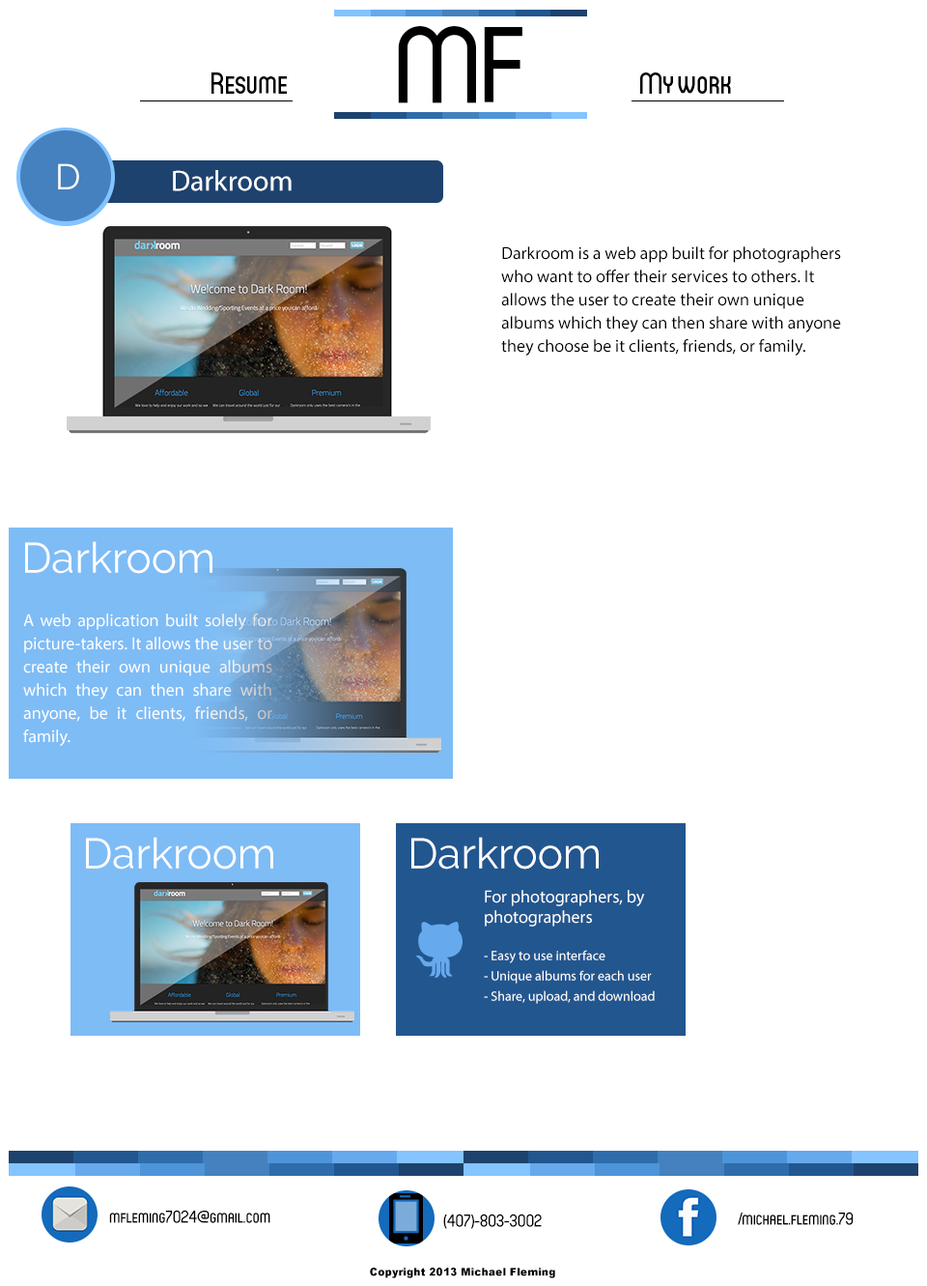
<style>
.page{position:relative;width:927px;height:1286px;background:#ffffff}
.page>*{position:absolute;margin:0}
.t1{font:108.2px "Circula-Medium";color:#000000}
.t2{font:35.7px "Raleway-Regular";color:#ffffff}
.t3{font:29px "MyriadPro-Regular";color:#ffffff}
.t4{font:17.4px/23.2px "MyriadPro-Regular";color:#000000}
.t5{font:42.5px "Raleway-Regular";color:#ffffff}
.t6{font:17.4px/23.2px "MyriadPro-Regular";color:#ffffff}
.t7{font:13.5px/20.3px "MyriadPro-Regular";color:#ffffff}
.t8{font:17.4px/20.3px "MyriadPro-Regular";color:#ffffff}
.t9{font:17.4px "Circula-Medium";color:#000000}
.t10{font:10.6px "Arial-Black";color:#000000}
</style>
<div class="page">
<p class="t1" style="left:398px;top:26px;width:125px;height:77px">MF</p>
<p class="t2" style="left:58px;top:163px;width:21px;height:26px">D</p>
<p class="t3" style="left:173px;top:170px;width:119px;height:21px">Darkroom</p>
<p class="t4" style="left:501px;top:246px;width:340px;height:110px">Darkroom is a web app built for photographers who want to offer their services to others. It allows the user to create their own unique albums which they can then share with anyone they choose be it clients, friends, or family.</p>
<p class="t5" style="left:25px;top:541px;width:188px;height:33px">Darkroom</p>
<p class="t6" style="left:23px;top:613px;width:249px;height:133px;text-align:justify">A web application built solely for picture-takers. It allows the user to create their own unique albums which they can then share with anyone, be it clients, friends, or family.</p>
<p class="t5" style="left:86px;top:837px;width:187px;height:32px">Darkroom</p>
<p class="t5" style="left:412px;top:837px;width:187px;height:32px">Darkroom</p>
<p class="t7" style="left:484px;top:890px;width:171px;height:114px"><span class="t8">For photographers, by photographers<br><br></span>- Easy to use interface<br>- Unique albums for each user<br>- Share, upload, and download</p>
<p class="t9" style="left:109px;top:1209px;width:161px;height:14px">mfleming7024@gmail.com</p>
<p class="t9" style="left:443px;top:1213px;width:99px;height:16px">(407)-803-3002</p>
<p class="t9" style="left:738px;top:1211px;width:116px;height:14px">/michael.fleming.79</p>
<p class="t10" style="left:370px;top:1267px;width:185px;height:11px">Copyright 2013 Michael Fleming</p>
</div>
